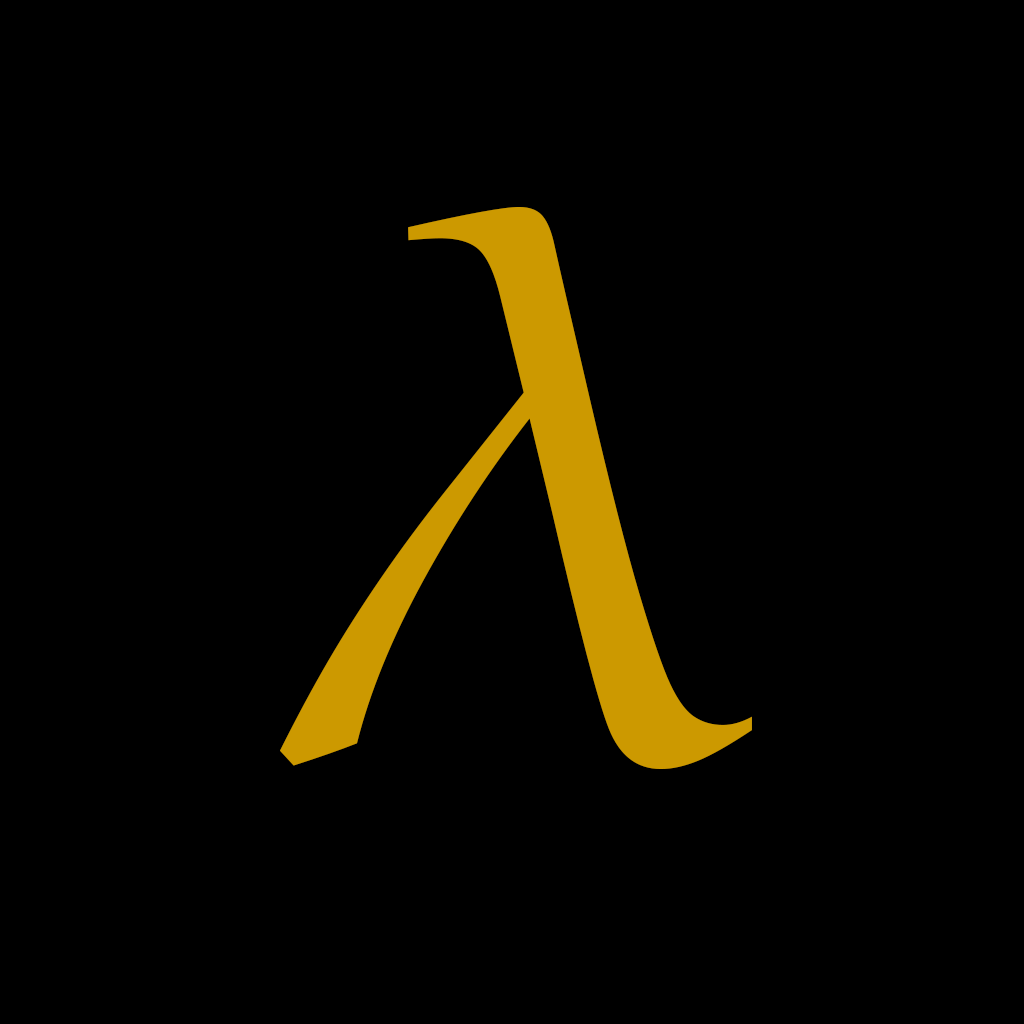
<style>
.page{position:relative;width:1024px;height:1024px;background:#000000}
.page>*{position:absolute;margin:0}
.t1{font:800px "Palatino-Roman";letter-spacing:-0.1em;color:#cc9900}
</style>
<div class="page">
<p class="t1" style="left:280px;top:207px;width:472px;height:562px">λ</p>
</div>
